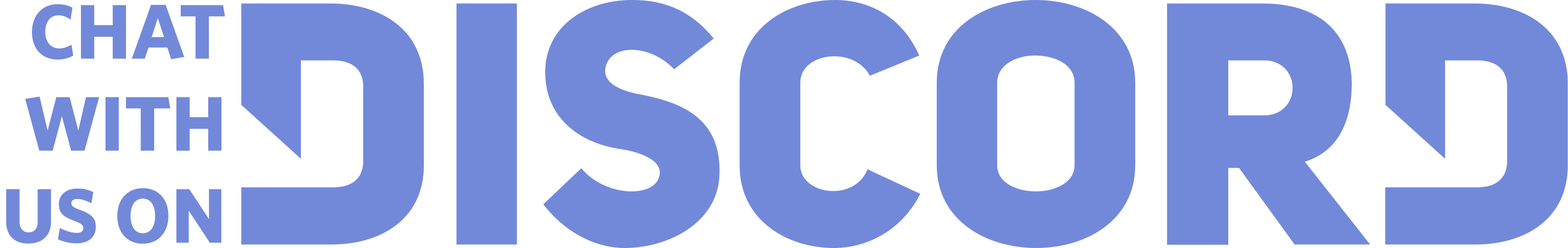
<style>
.page{position:relative;width:1568px;height:248px;background:#7289da}
.page>*{position:absolute;margin:0}
.t1{font:77.5px/92.1px "Whitney-BoldSC";color:#7289da}
</style>
<div class="page">
<p class="t1" style="left:6px;top:4px;width:219px;height:240px;text-align:right">CHAT<br>WITH<br>US ON</p>
</div>
